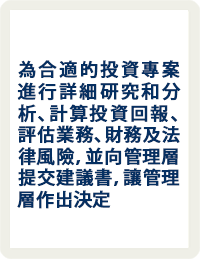
<style>
.page{position:relative;width:200px;height:259px;background:#ffffff}
.page>*{position:absolute;margin:0}
.t1{font:18px "KozGoPr6N-Medium";letter-spacing:0.005em;color:#052f61;font-weight:bold}
</style>
<div class="page">
<p class="t1" style="left:17px;top:60px;width:164px;height:149px;text-align:justify">為合適的投資專案進行詳細研究和分析、計算投資回報、評估業務、財務及法律風險，並向管理層提交建議書，讓管理層作出決定</p>
</div>
